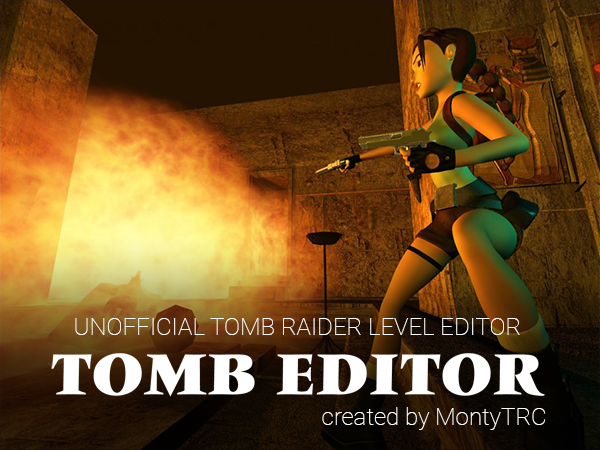
<style>
.page{position:relative;width:600px;height:450px}
.page>*{position:absolute;margin:0}
.t1{font:24px "Roboto-Thin";color:#ffffff}
</style>
<div class="page">
<p class="t1" style="left:75px;top:318px;width:445px;height:17px">UNOFFICIAL TOMB RAIDER LEVEL EDITOR</p>
<p class="t1" style="left:322px;top:407px;width:224px;height:23px">created by MontyTRC</p>
</div>
